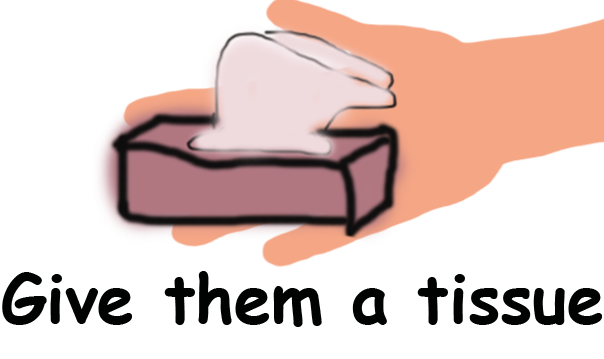
<style>
.page{position:relative;width:604px;height:359px;background:#ffffff}
.page>*{position:absolute;margin:0}
.t1{font:66.7px "ComicSansMS-Bold";color:#010202}
</style>
<div class="page">
<p class="t1" style="left:2px;top:271px;width:600px;height:56px">Give them a tissue</p>
</div>
